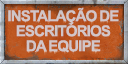
<style>
.page{position:relative;width:128px;height:64px}
.page>*{position:absolute;margin:0}
.t1{font:15px/15px "Arial-BoldMT";letter-spacing:-0.09em;color:#d2c5c7;text-transform:uppercase}
</style>
<div class="page">
<p class="t1" style="left:8px;top:7px;width:111px;height:46px;text-align:center">INSTALAÇÃO DE<br>ESCRITóRIOS<br>DA EQUIPE</p>
</div>
